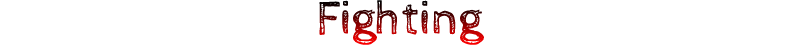
<style>
.page{position:relative;width:800px;height:46px;background:#ffffff}
.page>*{position:absolute;margin:0}
.t1{font:48px "CabinSketch-Regular"}
</style>
<div class="page">
<p class="t1" style="left:319px;top:0px;width:165px;height:45px">Fighting</p>
</div>
